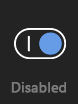
<style>
.page{position:relative;width:78px;height:104px;background:#232323}
.page>*{position:absolute;margin:0}
.t1{font:14px "SegoeUI";color:#7c7c7c;font-weight:bold}
</style>
<div class="page">
<p class="t1" style="left:11px;top:82px;width:55px;height:11px">Disabled</p>
</div>
